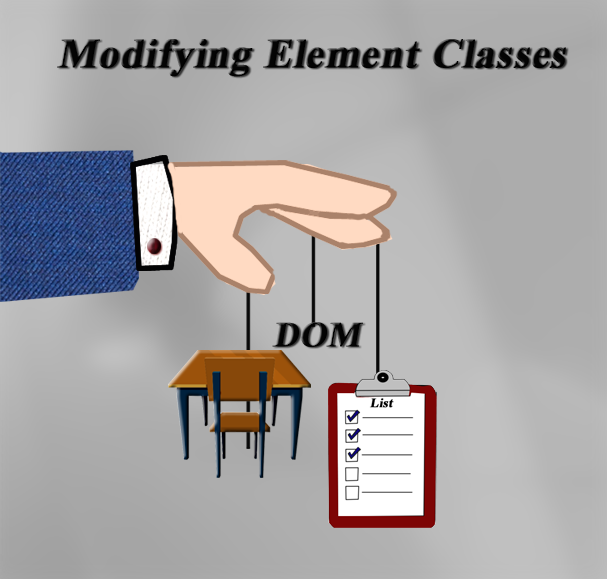
<style>
.page{position:relative;width:607px;height:579px}
.page>*{position:absolute;margin:0}
.t1{font:41.3px "TimesNewRomanPS-BoldMT";color:#040404;font-weight:bold;font-style:italic}
.t2{font:34.7px "TimesNewRomanPS-BoldMT";color:#040404;font-weight:bold;font-style:italic}
</style>
<div class="page">
<p class="t1" style="left:57px;top:39px;width:509px;height:38px">Modifying Element Classes</p>
<p class="t2" style="left:272px;top:322px;width:91px;height:25px">DOM</p>
</div>
